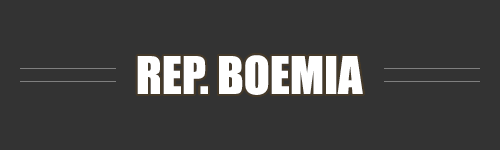
<style>
.page{position:relative;width:500px;height:150px;background:#333333}
.page>*{position:absolute;margin:0}
.t1{font:48px "Impact";color:#ffffff}
</style>
<div class="page">
<p class="t1" style="left:137px;top:55px;width:226px;height:40px">REP. BOEMIA</p>
</div>
